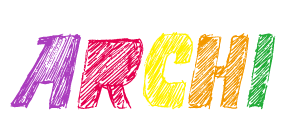
<style>
.page{position:relative;width:288px;height:135px;background:#ffffff}
.page>*{position:absolute;margin:0}
.t1{font:90px "vtksstudy";color:#ab3dbe;font-style:italic}
.t2{font:90px "vtksstudy";color:#e5004f;font-style:italic}
.t3{font:90px "vtksstudy";color:#fff100;font-style:italic}
.t4{font:90px "vtksstudy";color:#f39800;font-style:italic}
.t5{font:90px "vtksstudy";color:#22ac38;font-style:italic}
</style>
<div class="page">
<p class="t1" style="left:10px;top:32px;width:266px;height:78px">A<span class="t2">R</span><span class="t3">C</span><span class="t4">H</span><span class="t5">I</span></p>
</div>
